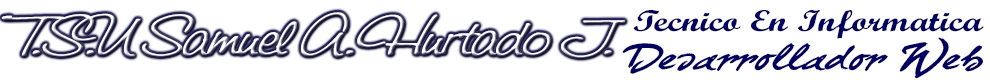
<style>
.page{position:relative;width:990px;height:80px;background:#ffffff}
.page>*{position:absolute;margin:0}
.t1{font:40.8px "SaginawBold";color:#ffffff;scale:1.39 1}
.t2{font:30px "ScriptMTBold";color:#000066;scale:1.27 1}
.t3{font:30px "CurlyJoe";color:#000066;scale:1.45 1}
</style>
<div class="page">
<p class="t1" style="left:1px;top:12px;width:624px;height:46px">T.S.U Samuel A. Hurtado J.</p>
<p class="t2" style="left:633px;top:10px;width:351px;height:29px">Tecnico En Informatica</p>
<p class="t3" style="left:622px;top:37px;width:361px;height:42px">Desarrollador Web</p>
</div>
